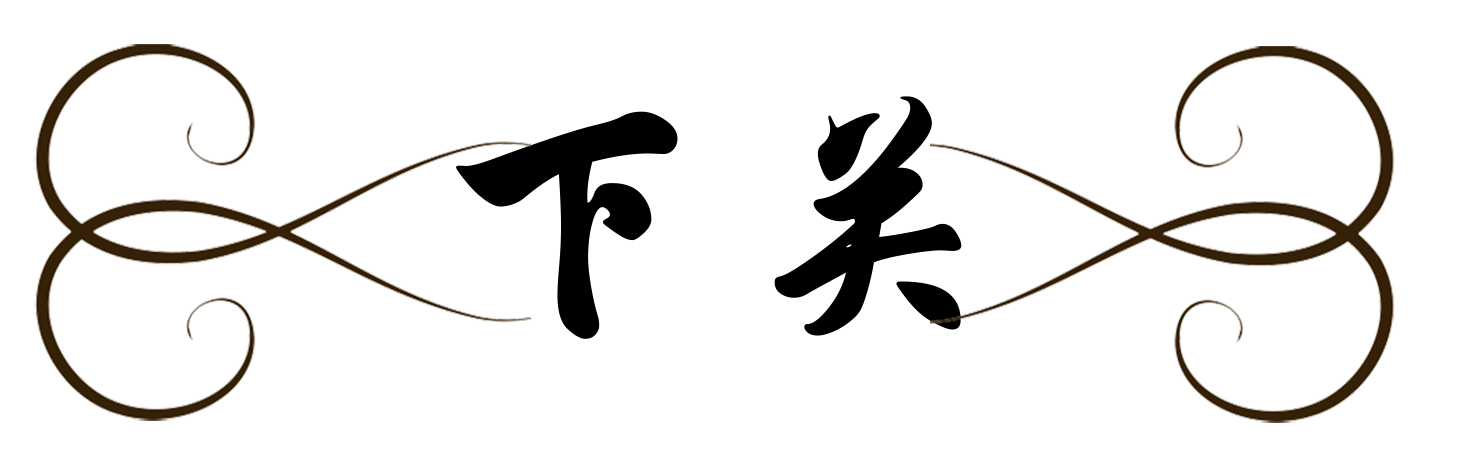
<style>
.page{position:relative;width:1467px;height:467px;background:#ffffff}
.page>*{position:absolute;margin:0}
.t1{font:300px "STXingkai";color:#000000}
</style>
<div class="page">
<p class="t1" style="left:456px;top:96px;width:506px;height:243px">下关</p>
</div>
